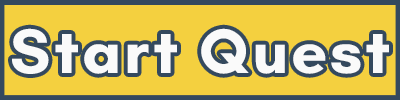
<style>
.page{position:relative;width:400px;height:100px;background:#f4d03f}
.page>*{position:absolute;margin:0}
.t1{font:64px "Teachers-Bold";letter-spacing:0.05em;color:#fafafa}
</style>
<div class="page">
<p class="t1" style="left:12px;top:28px;width:377px;height:46px">Start Quest</p>
</div>
